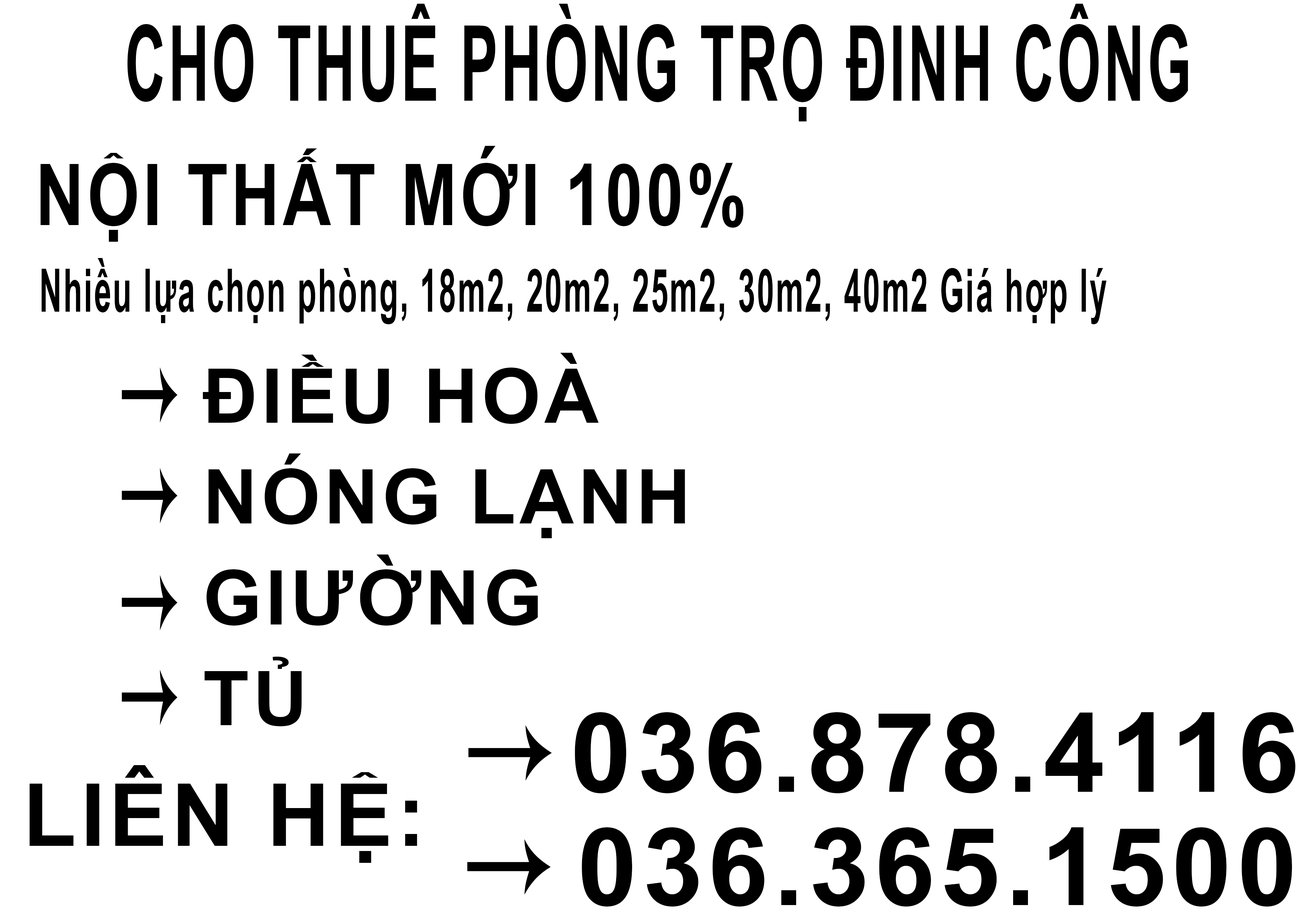
<style>
.page{position:relative;width:1299px;height:918px;background:#ffffff}
.page>*{position:absolute;margin:0}
.t1{font:104.7px "Arial-BoldMT";letter-spacing:0.05em;color:#000000;scale:0.54 1}
.t2{font:85.3px "Arial-BoldMT";letter-spacing:0.05em;color:#000000;scale:0.79 1}
.t3{font:59.6px "Arial-BoldMT";letter-spacing:0.05em;color:#000000;scale:0.52 1}
.t4{font:75.6px/25.2px "Arial-BoldMT";letter-spacing:0.05em;color:#000000}
.t5{font:110.2px "Arial-BoldMT";letter-spacing:0.05em;color:#000000}
.t6{font:86.9px "Arial-BoldMT";letter-spacing:0.05em;color:#000000}
.t7{font:108px "Arial-BoldMT";letter-spacing:0.05em;color:#000000}
</style>
<div class="page">
<p class="t1" style="left:127px;top:4px;width:1061px;height:117px">CHO THUÊ PHÒNG TRỌ ĐINH CÔNG</p>
<p class="t2" style="left:40px;top:146px;width:703px;height:96px">NỘI THẤT MỚI 100%</p>
<p class="t3" style="left:41px;top:258px;width:1065px;height:66px">Nhiều lựa chọn phòng, 18m2, 20m2, 25m2, 30m2, 40m2 Giá hợp lý</p>
<p class="t4" style="left:203px;top:353px;width:482px;height:373px">ĐIỀU HOÀ<br><br><br><br>NÓNG LẠNH<br><br><br><br>GIƯỜNG<br><br><br><br>TỦ</p>
<p class="t5" style="left:575px;top:712px;width:720px;height:81px">036.878.4116</p>
<p class="t6" style="left:29px;top:765px;width:388px;height:98px">LIÊN HỆ:</p>
<p class="t7" style="left:582px;top:827px;width:710px;height:80px">036.365.1500</p>
</div>
